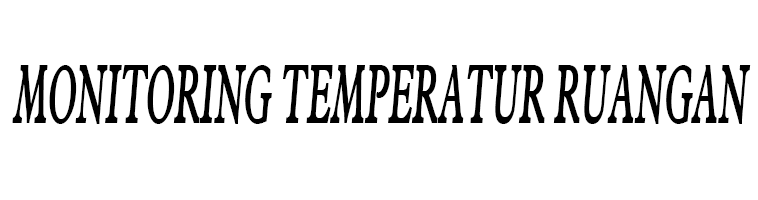
<style>
.page{position:relative;width:758px;height:200px;background:#ffffff}
.page>*{position:absolute;margin:0}
.t1{font:60.5px "NadineWideBoldItalic";color:#000000;scale:0.38 1}
</style>
<div class="page">
<p class="t1" style="left:12px;top:65px;width:739px;height:59px">MONITORING TEMPERATUR RUANGAN</p>
</div>
